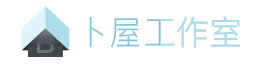
<style>
.page{position:relative;width:260px;height:64px;background:#ffffff}
.page>*{position:absolute;margin:0}
.t1{font:33.3px "PingFang-SC-Regular"}
</style>
<div class="page">
<p class="t1" style="left:89px;top:16px;width:151px;height:32px">卜屋工作室</p>
<p class="t1" style="left:89px;top:16px;width:151px;height:32px">卜屋工作室</p>
</div>
